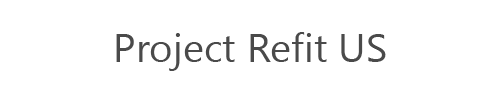
<style>
.page{position:relative;width:500px;height:100px;background:#ffffff}
.page>*{position:absolute;margin:0}
.t1{font:40px "Gadugi";color:#4a4a4a}
</style>
<div class="page">
<p class="t1" style="left:116px;top:32px;width:270px;height:39px">Project Refit US</p>
</div>
